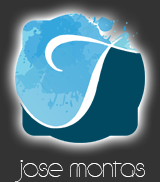
<style>
.page{position:relative;width:160px;height:182px;background:#333333}
.page>*{position:absolute;margin:0}
.t1{font:6.5px "CircleD";color:#ffffff}
</style>
<div class="page">
<p class="t1" style="left:15px;top:160px;width:130px;height:22px">jose montas</p>
</div>
